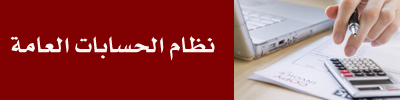
<style>
.page{position:relative;width:400px;height:100px;background:#810102}
.page>*{position:absolute;margin:0}
.t1{font:30px "";color:#f9f6f6}
</style>
<div class="page">
<p class="t1" style="left:10px;top:36px;width:205px;height:25px">نظام الحسابات العامة</p>
</div>
